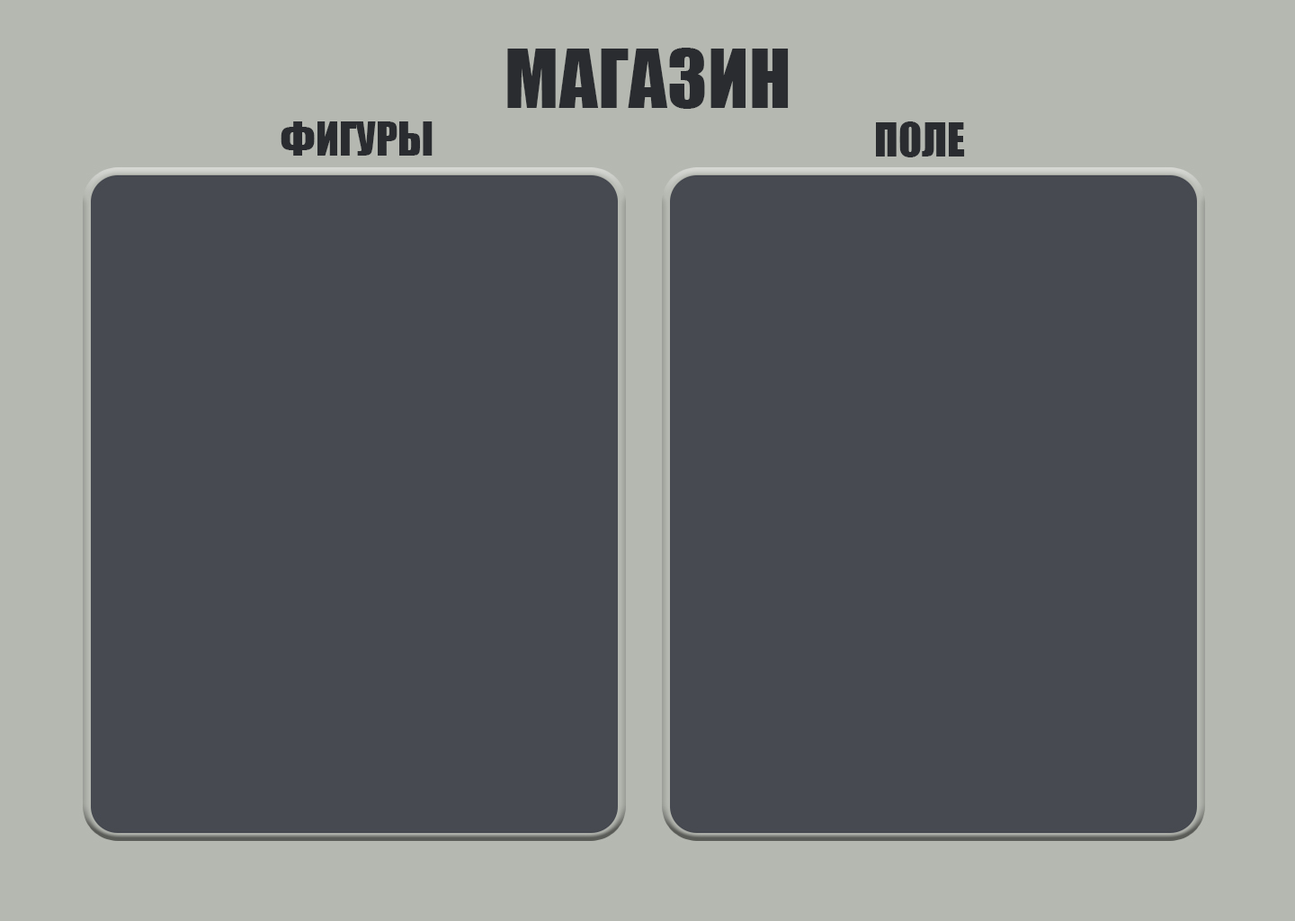
<style>
.page{position:relative;width:1295px;height:921px;background:#474a51}
.page>*{position:absolute;margin:0}
.t1{font:43.2px "Impact";color:#2a2c30}
</style>
<div class="page">
<p class="t1" style="left:281px;top:121px;width:152px;height:35px">ФИГУРЫ</p>
<p class="t1" style="left:876px;top:121px;width:89px;height:36px">ПОЛЕ</p>
</div>
